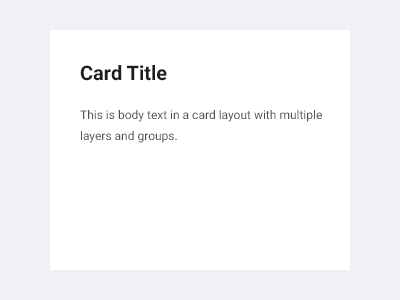
<style>
.page{position:relative;width:400px;height:300px;background:#ffffff}
.page>*{position:absolute;margin:0}
.t1{font:20px "Roboto-Bold";color:#1e1e1e}
.t2{font:12px "Roboto-Regular";color:#505050}
</style>
<div class="page">
<p class="t1" style="left:80px;top:65px;width:87px;height:16px">Card Title</p>
<p class="t2" style="left:80px;top:110px;width:242px;height:33px">This is body text in a card layout with multiple layers and groups.</p>
</div>
